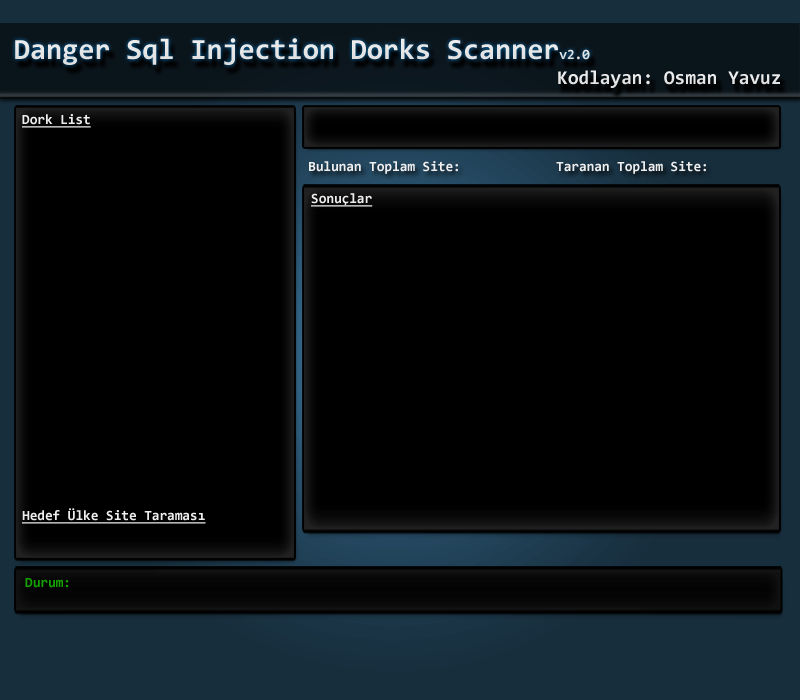
<style>
.page{position:relative;width:800px;height:700px;background:#000000}
.page>*{position:absolute;margin:0}
.t1{font:29.2px "Consolas-Bold";color:#eeeeee}
.t2{font:13.9px "Consolas-Bold";color:#eeeeee}
.t3{font:19.4px "Consolas-Bold";color:#eeeeee}
.t4{font:13.9px "Consolas-Bold";color:#eeeeee;text-decoration:underline}
.t5{font:13.9px "Consolas-Bold";color:#13a100}
</style>
<div class="page">
<p class="t1" style="left:15px;top:38px;width:575px;height:27px">Danger Sql Injection Dorks Scanner<span class="t2">v2.0</span></p>
<p class="t3" style="left:558px;top:70px;width:222px;height:18px">Kodlayan: Osman Yavuz</p>
<p class="t4" style="left:22px;top:114px;width:69px;height:14px">Dork List</p>
<p class="t2" style="left:309px;top:161px;width:149px;height:13px">Bulunan Toplam Site:</p>
<p class="t2" style="left:556px;top:161px;width:150px;height:13px">Taranan Toplam Site:</p>
<p class="t4" style="left:311px;top:193px;width:62px;height:14px">Sonuçlar</p>
<p class="t4" style="left:22px;top:508px;width:184px;height:16px">Hedef Ülke Site Taraması</p>
<p class="t5" style="left:25px;top:578px;width:44px;height:10px">Durum:</p>
</div>
